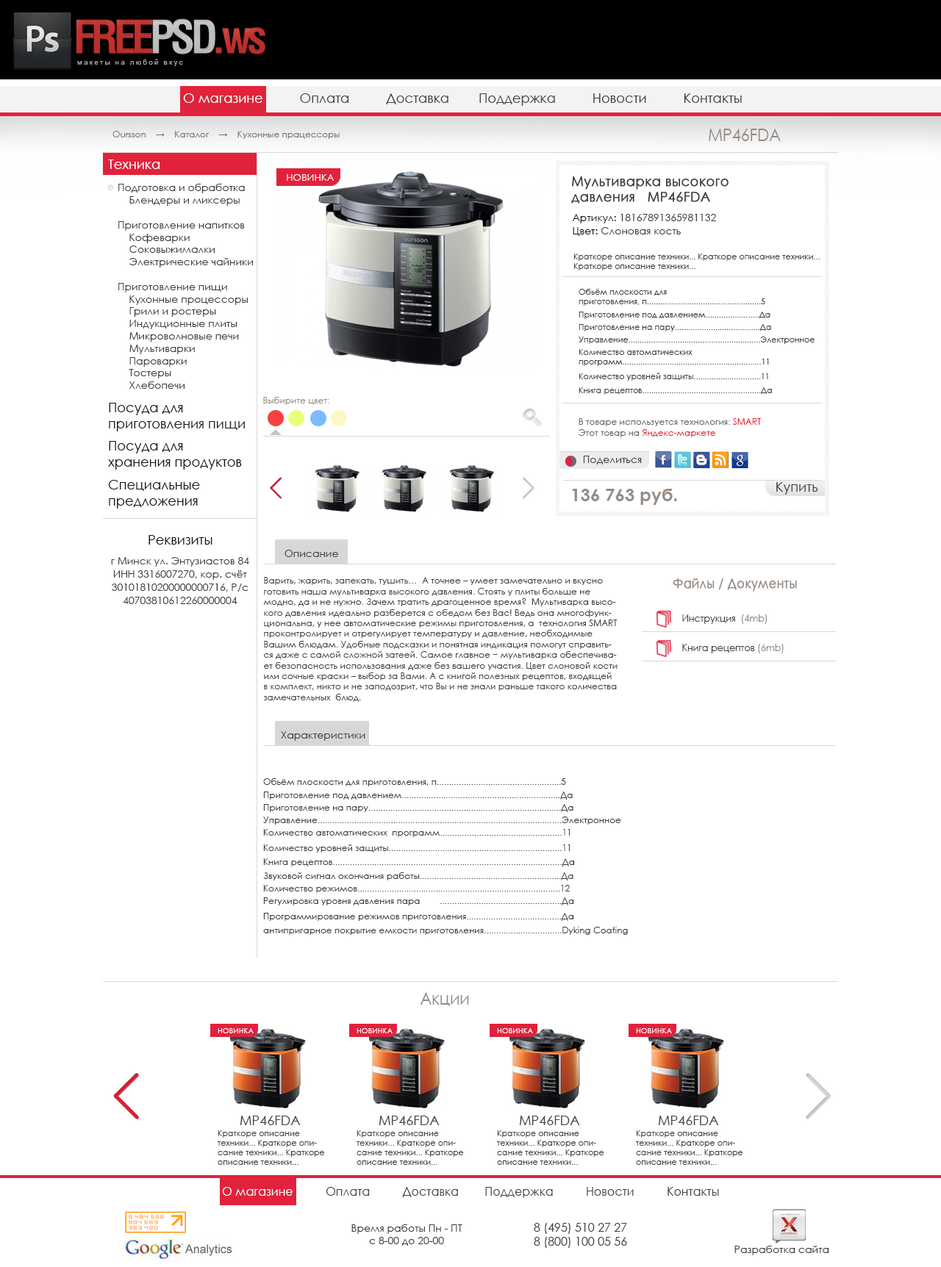
<style>
.page{position:relative;width:941px;height:1267px;background:#ffffff}
.page>*{position:absolute;margin:0}
.t1{font:13.2px "CenturyGothic";color:#434342}
.t2{font:13.2px "CenturyGothic";color:#ffffff}
.t3{font:8.8px "CenturyGothic";color:#7f746c}
.t4{font:17.6px "CenturyGothic";color:#968c85;scale:0.9 1}
.t5{font:10.3px "CenturyGothic";color:#423c37}
.t6{font:9.8px "CenturyGothic";color:#ffffff;text-transform:uppercase}
.t7{font:13.2px "CenturyGothic";color:#434342;font-weight:bold}
.t8{font:10.3px "CenturyGothic";color:#151515}
.t9{font:8.1px "CenturyGothic";color:#423c37}
.t10{font:8.8px "CenturyGothic";color:#968c85}
.t11{font:13.2px "CenturyGothic";color:#151515}
.t12{font:8.8px "CenturyGothic";color:#666665}
.t13{font:8.8px "CenturyGothic";color:#e1223c}
.t14{font:10.3px "CenturyGothic";color:#434342}
.t15{font:17.6px "CenturyGothic-Bold";color:#968c85}
.t16{font:10.3px/13.2px "CenturyGothic";color:#423c37}
.t17{font:8.8px "CenturyGothic";color:#434342}
.t18{font:13.2px "CenturyGothic";color:#968c85;font-weight:bold;scale:0.9 1}
.t19{font:10.3px "CenturyGothic";color:#434342;scale:0.9 1}
.t20{font:10.3px "CenturyGothic";color:#968c85;scale:0.9 1}
.t21{font:8.8px "CenturyGothic";color:#423c37}
.t22{font:7.4px "CenturyGothic";color:#ffffff;text-transform:uppercase}
.t23{font:11.8px "CenturyGothic";color:#434342}
.t24{font:11.8px "CenturyGothic";color:#ffffff}
.t25{font:11.8px "CenturyGothic";color:#423c37}
</style>
<div class="page">
<p class="t1" style="left:183px;top:93px;width:559px;height:13px">О магазине          Оплата          Доставка        Поддержка          Новости          Контакты</p>
<p class="t2" style="left:183px;top:93px;width:79px;height:10px">О магазине</p>
<p class="t3" style="left:112px;top:131px;width:228px;height:8px">Oursson    →    Каталог    →    Кухонные працессоры</p>
<p class="t4" style="left:709px;top:129px;width:72px;height:12px">MP46FDA</p>
<p class="t2" style="left:108px;top:160px;width:52px;height:9px">Техника</p>
<p class="t5" style="left:118px;top:184px;width:135px;height:205px">Подготовка и обработка<br>    Блендеры и миксеры<br><br>Приготовление напитков<br>    Кофеварки<br>    Соковыжималки<br>    Электрические чайники<br><br>Приготовление пищи<br>    Кухонные процессоры<br>    Грили и ростеры<br>    Индукционные плиты<br>    Микроволновые печи<br>    Мультиварки<br>    Пароварки<br>    Тостеры<br>    Хлебопечи</p>
<p class="t6" style="left:287px;top:174px;width:47px;height:7px">Новинка</p>
<p class="t7" style="left:571px;top:176px;width:157px;height:28px">Мультиварка высокого <br>давления   MP46FDA</p>
<p class="t5" style="left:572px;top:214px;width:144px;height:9px"><span class="t8">Артикул: </span>18167891365981132</p>
<p class="t5" style="left:573px;top:227px;width:108px;height:9px"><span class="t8">Цвет: </span>Слоновая кость</p>
<p class="t9" style="left:573px;top:254px;width:247px;height:17px">Краткоре описание техники... Краткоре описание техники... Краткоре описание техники...</p>
<p class="t9" style="left:579px;top:289px;width:186px;height:17px">Обьём плоскости для <br>приготовления, п...................................................5</p>
<p class="t9" style="left:579px;top:312px;width:191px;height:7px">Приготовление под давлением........................Да</p>
<p class="t9" style="left:579px;top:324px;width:192px;height:8px">Приготовление на пару......................................Да</p>
<p class="t9" style="left:579px;top:337px;width:235px;height:7px">Управление...........................................................Электронное</p>
<p class="t9" style="left:579px;top:349px;width:190px;height:17px">Количество автоматических <br>программ..............................................................11</p>
<p class="t9" style="left:579px;top:373px;width:189px;height:8px">Количество уровней защиты..............................11</p>
<p class="t9" style="left:579px;top:387px;width:193px;height:8px">Книга рецептов.....................................................Да</p>
<p class="t10" style="left:263px;top:397px;width:66px;height:8px">Выбирите цвет:</p>
<p class="t11" style="left:109px;top:403px;width:136px;height:29px">Посуда для <br>приготовления пищи</p>
<p class="t12" style="left:579px;top:418px;width:182px;height:19px">В товаре используется технология: <span class="t13">SMART<br></span>    Этот товар на <span class="t13">Яндекс-маркете</span></p>
<p class="t11" style="left:108px;top:441px;width:134px;height:29px">Посуда для <br>хранения продуктов</p>
<p class="t14" style="left:583px;top:456px;width:59px;height:9px">Поделиться</p>
<p class="t11" style="left:108px;top:480px;width:92px;height:29px">Специальные <br>предложения</p>
<p class="t1" style="left:776px;top:482px;width:42px;height:13px">Купить</p>
<p class="t15" style="left:572px;top:489px;width:105px;height:16px">136 763 руб.</p>
<p class="t11" style="left:148px;top:535px;width:64px;height:10px">Реквизиты</p>
<p class="t16" style="left:111px;top:557px;width:138px;height:47px;text-align:center">г Минск ул. Энтузиастов 84<br>ИНН 3316007270, кор. счёт 30101810200000000716, Р/с 40703810612260000004</p>
<p class="t14" style="left:284px;top:550px;width:54px;height:7px">Описание</p>
<p class="t17" style="left:263px;top:577px;width:354px;height:125px">Варить, жарить, запекать, тушить…  А точнее – умеет замечательно и вкусно готовить наша мультиварка высокого давления. Стоять у плиты больше не модно, да и не нужно. Зачем тратить драгоценное время?  Мультиварка высокого давления идеально разберется с обедом без Вас! Ведь она многофункциональна, у нее автоматические режимы приготовления, а  технология SMART проконтролирует и отрегулирует температуру и давление, необходимые Вашим блюдам. Удобные подсказки и понятная индикация помогут справиться даже с самой сложной затеей. Самое главное − мультиварка обеспечивает безопасность использования даже без вашего участия. Цвет слоновой кости или сочные краски – выбор за Вами. А с книгой полезных рецептов, входящей в комплект, никто и не заподозрит, что Вы и не знали раньше такого количества замечательных  блюд.</p>
<p class="t18" style="left:673px;top:579px;width:124px;height:13px">Файлы / Документы</p>
<p class="t19" style="left:682px;top:615px;width:85px;height:9px">Инструкция  <span class="t20">(4mb)</span></p>
<p class="t19" style="left:682px;top:644px;width:102px;height:9px">Книга рецептов <span class="t20">(6mb)</span></p>
<p class="t14" style="left:281px;top:731px;width:84px;height:10px">Характеристики</p>
<p class="t21" style="left:263px;top:778px;width:303px;height:9px">Обьём плоскости для приготовления, п...................................................5</p>
<p class="t21" style="left:263px;top:792px;width:310px;height:8px">Приготовление под давлением.................................................................Да</p>
<p class="t21" style="left:263px;top:804px;width:310px;height:8px">Приготовление на пару...............................................................................Да</p>
<p class="t21" style="left:263px;top:817px;width:358px;height:8px">Управление....................................................................................................Электронное</p>
<p class="t21" style="left:263px;top:829px;width:307px;height:8px">Количество автоматических  программ..................................................11</p>
<p class="t21" style="left:263px;top:845px;width:307px;height:8px">Количество уровней защиты.......................................................................11</p>
<p class="t21" style="left:263px;top:859px;width:312px;height:8px">Книга рецептов..............................................................................................Да</p>
<p class="t21" style="left:263px;top:873px;width:310px;height:8px">Звуковой сигнал окончания работы..........................................................Да</p>
<p class="t21" style="left:263px;top:885px;width:307px;height:8px">Количество режимов...................................................................................12</p>
<p class="t21" style="left:263px;top:898px;width:311px;height:8px">Регулировка уровня давления пара        ..................................................Да</p>
<p class="t21" style="left:263px;top:913px;width:311px;height:8px">Программирование режимов приготовления.......................................Да</p>
<p class="t21" style="left:263px;top:927px;width:365px;height:8px">антипригарное покрытие емкости приготовления................................Dyking Coating</p>
<p class="t4" style="left:420px;top:992px;width:49px;height:14px">Акции</p>
<p class="t22" style="left:218px;top:1028px;width:36px;height:6px">Новинка</p>
<p class="t22" style="left:357px;top:1028px;width:36px;height:6px">Новинка</p>
<p class="t22" style="left:497px;top:1028px;width:36px;height:6px">Новинка</p>
<p class="t22" style="left:636px;top:1028px;width:36px;height:6px">Новинка</p>
<p class="t1" style="left:240px;top:1116px;width:61px;height:9px">MP46FDA</p>
<p class="t1" style="left:379px;top:1116px;width:61px;height:9px">MP46FDA</p>
<p class="t1" style="left:519px;top:1116px;width:61px;height:9px">MP46FDA</p>
<p class="t1" style="left:658px;top:1116px;width:61px;height:9px">MP46FDA</p>
<p class="t9" style="left:218px;top:1131px;width:107px;height:34px">Краткоре описание техники... Краткоре описание техники... Краткоре описание техники...</p>
<p class="t9" style="left:357px;top:1131px;width:107px;height:34px">Краткоре описание техники... Краткоре описание техники... Краткоре описание техники...</p>
<p class="t9" style="left:497px;top:1131px;width:107px;height:34px">Краткоре описание техники... Краткоре описание техники... Краткоре описание техники...</p>
<p class="t9" style="left:636px;top:1131px;width:107px;height:34px">Краткоре описание техники... Краткоре описание техники... Краткоре описание техники...</p>
<p class="t23" style="left:222px;top:1187px;width:497px;height:11px">О магазине          Оплата          Доставка        Поддержка          Новости          Контакты</p>
<p class="t24" style="left:222px;top:1187px;width:71px;height:9px">О магазине</p>
<p class="t5" style="left:351px;top:1225px;width:111px;height:21px;text-align:center">Время работы Пн - ПТ<br>с 8-00 до 20-00</p>
<p class="t25" style="left:534px;top:1223px;width:93px;height:25px;text-align:center">8 (495) 510 27 27     <br>8 (800) 100 05 56</p>
<p class="t5" style="left:734px;top:1246px;width:95px;height:10px">Разработка сайта</p>
</div>
